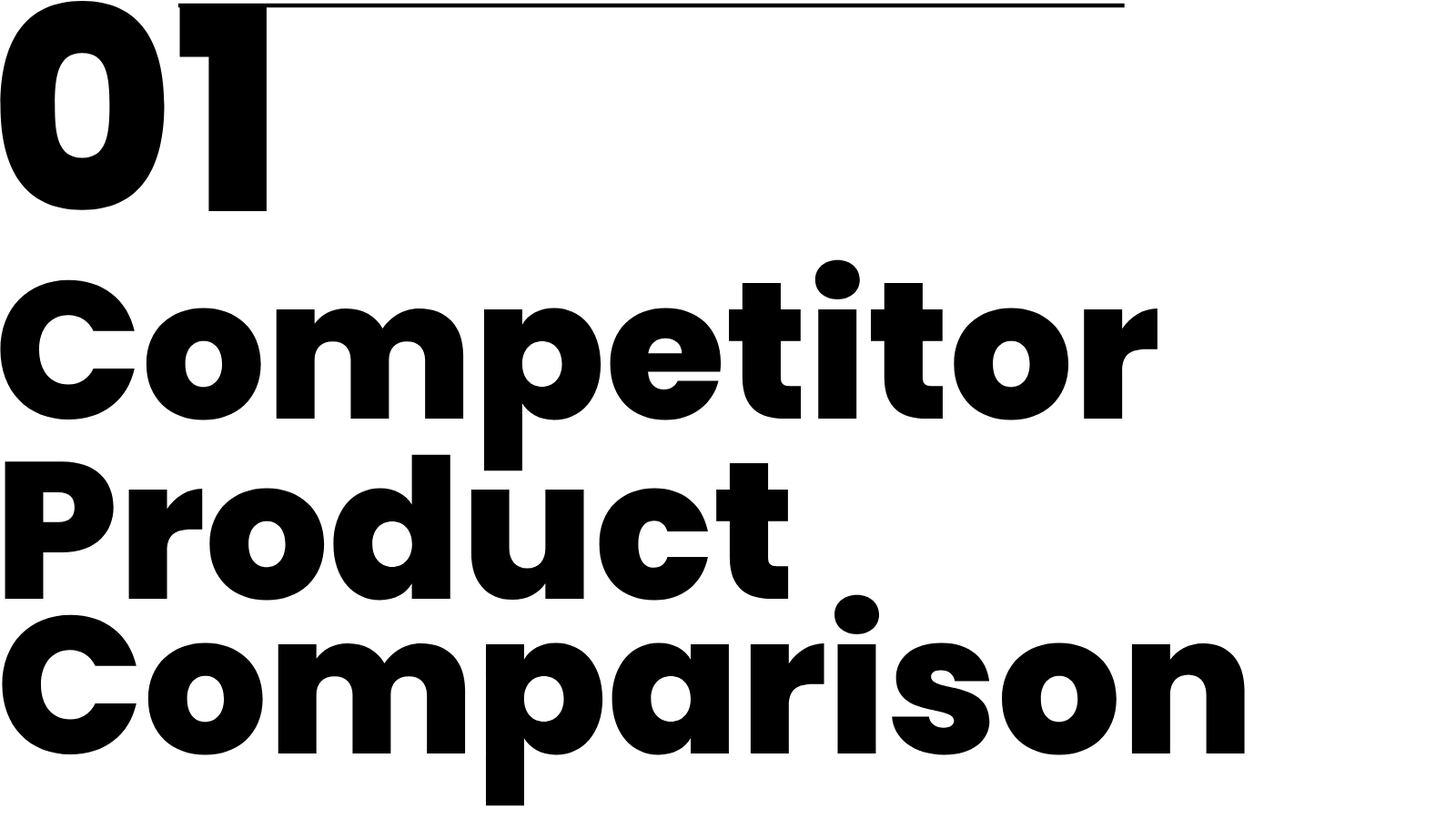
<style>
.page{position:relative;width:1456px;height:819px;background:#ffffff}
.page>*{position:absolute;margin:0}
.t1{font:281.9px "Poppins-ExtraBold";color:#000000}
.t2{font:194.6px "Poppins-ExtraBold";color:#000000}
</style>
<div class="page">
<p class="t1" style="left:0px;top:1px;width:267px;height:210px">01</p>
<p class="t2" style="left:0px;top:259px;width:1158px;height:212px">Competitor</p>
<p class="t2" style="left:5px;top:454px;width:784px;height:147px">Product</p>
<p class="t2" style="left:2px;top:594px;width:1243px;height:212px">Comparison</p>
</div>
